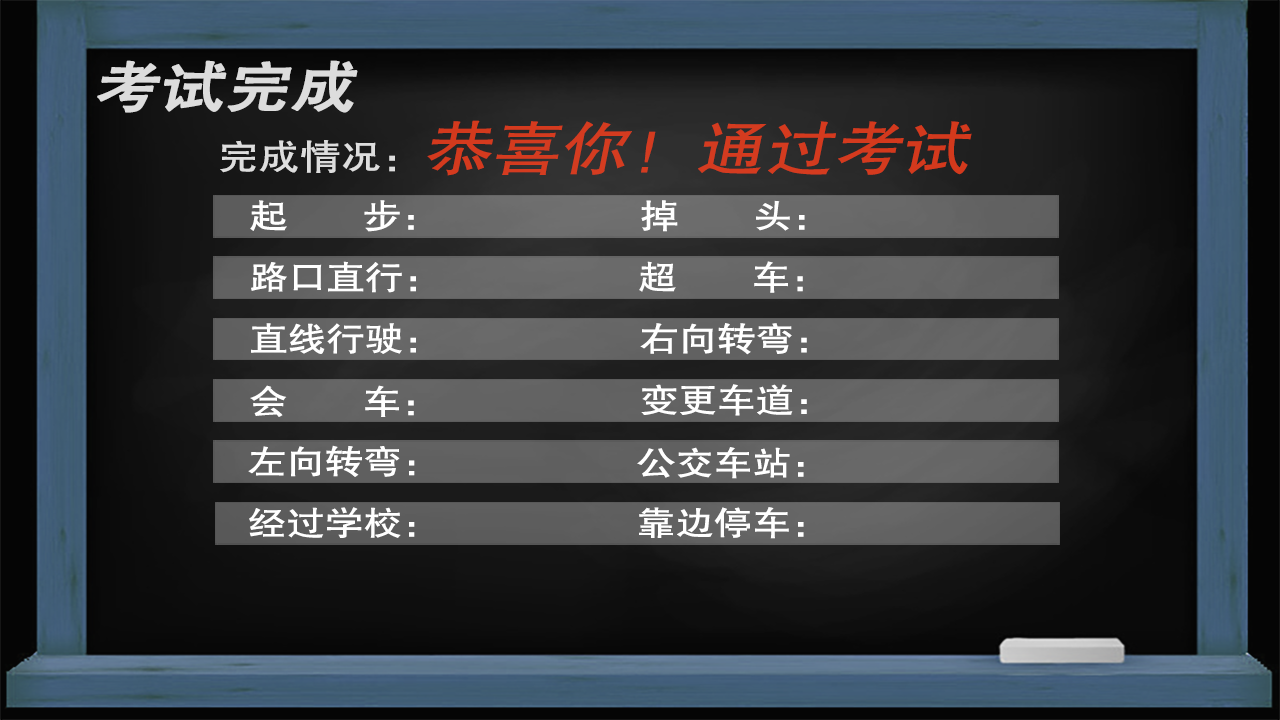
<style>
.page{position:relative;width:1280px;height:720px}
.page>*{position:absolute;margin:0}
.t1{font:55.8px "FZHTJW--GB1-0";color:#dcdcdc;font-weight:bold;font-style:italic;scale:1.15 1}
.t2{font:59.2px "FZHTJW--GB1-0";color:#d43b1f;font-style:italic;scale:1.15 1}
.t3{font:39.5px "FZHTJW--GB1-0";color:#d43b1f;font-weight:bold;font-style:italic;scale:1.15 1}
.t4{font:35.5px "FZHTJW--GB1-0";color:#d43b1f;scale:1.15 1}
.t5{font:33.5px "FZHTJW--GB1-0";color:#ffffff;scale:1.15 1}
</style>
<div class="page">
<p class="t1" style="left:97px;top:60px;width:261px;height:53px">考试完成</p>
<p class="t2" style="left:220px;top:120px;width:752px;height:56px"><span class="t3"><br></span><span class="t4">完成情况：</span>恭喜你！通过考试</p>
<p class="t5" style="left:250px;top:200px;width:164px;height:32px">起       步：</p>
<p class="t5" style="left:641px;top:200px;width:164px;height:32px">掉       头：</p>
<p class="t5" style="left:251px;top:261px;width:165px;height:32px">路口直行：</p>
<p class="t5" style="left:639px;top:261px;width:164px;height:32px">超       车：</p>
<p class="t5" style="left:251px;top:323px;width:165px;height:31px">直线行驶：</p>
<p class="t5" style="left:640px;top:323px;width:167px;height:32px">右向转弯：</p>
<p class="t5" style="left:250px;top:385px;width:164px;height:32px">会       车：</p>
<p class="t5" style="left:641px;top:384px;width:166px;height:32px">变更车道：</p>
<p class="t5" style="left:248px;top:445px;width:167px;height:32px">左向转弯：</p>
<p class="t5" style="left:637px;top:447px;width:167px;height:32px">公交车站：</p>
<p class="t5" style="left:249px;top:507px;width:166px;height:31px">经过学校：</p>
<p class="t5" style="left:639px;top:507px;width:165px;height:32px">靠边停车：</p>
</div>
